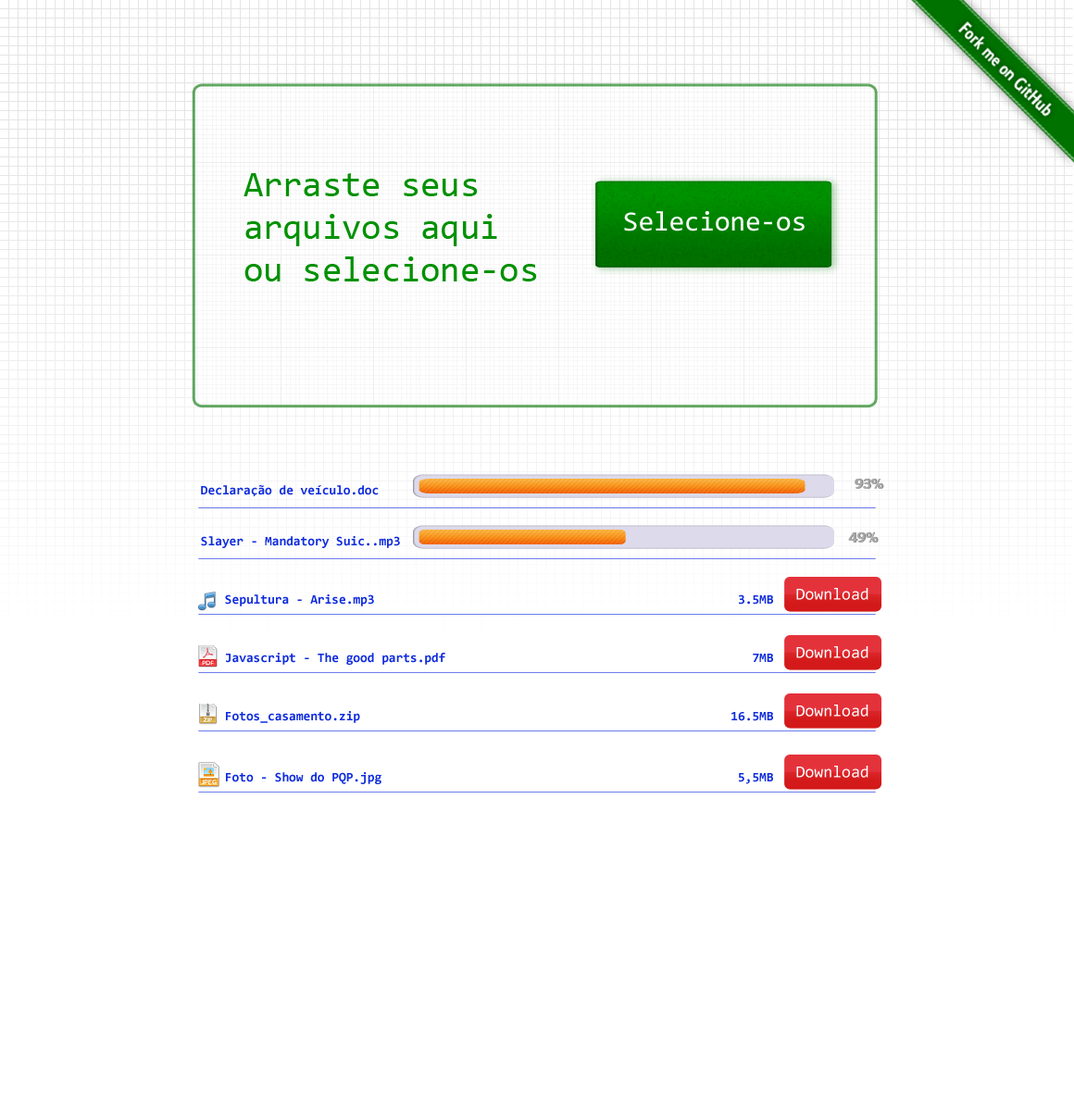
<style>
.page{position:relative;width:1074px;height:1111px;background:#ffffff}
.page>*{position:absolute;margin:0}
.t1{font:35.8px "Consolas";color:#009100}
.t2{font:27.8px "Consolas";color:#ffffff}
.t3{font:13px "Consolas-Bold";color:#0e2bdd}
.t4{font:16.7px "BerlinSansFB-Reg";color:#aaaaaa}
.t5{font:16.7px "Consolas";color:#ffffff}
</style>
<div class="page">
<p class="t1" style="left:243px;top:173px;width:294px;height:108px">Arraste seus <br>arquivos aqui<br>ou selecione-os</p>
<p class="t2" style="left:624px;top:211px;width:180px;height:20px">Selecione-os</p>
<p class="t3" style="left:201px;top:485px;width:178px;height:11px">Declaração de veículo.doc</p>
<p class="t4" style="left:854px;top:479px;width:29px;height:10px">93%</p>
<p class="t4" style="left:848px;top:532px;width:29px;height:10px">49%</p>
<p class="t3" style="left:201px;top:536px;width:199px;height:12px">Slayer - Mandatory Suic..mp3</p>
<p class="t5" style="left:796px;top:588px;width:72px;height:12px">Download</p>
<p class="t3" style="left:225px;top:594px;width:548px;height:12px">Sepultura - Arise.mp3                                                   3.5MB</p>
<p class="t3" style="left:226px;top:653px;width:547px;height:12px">Javascript - The good parts.pdf                                           7MB</p>
<p class="t5" style="left:796px;top:646px;width:72px;height:12px">Download</p>
<p class="t3" style="left:226px;top:711px;width:547px;height:12px">Fotos_casamento.zip                                                    16.5MB</p>
<p class="t5" style="left:796px;top:704px;width:72px;height:12px">Download</p>
<p class="t3" style="left:226px;top:772px;width:547px;height:12px">Foto - Show do PQP.jpg                                                  5,5MB</p>
<p class="t5" style="left:796px;top:765px;width:72px;height:12px">Download</p>
</div>
